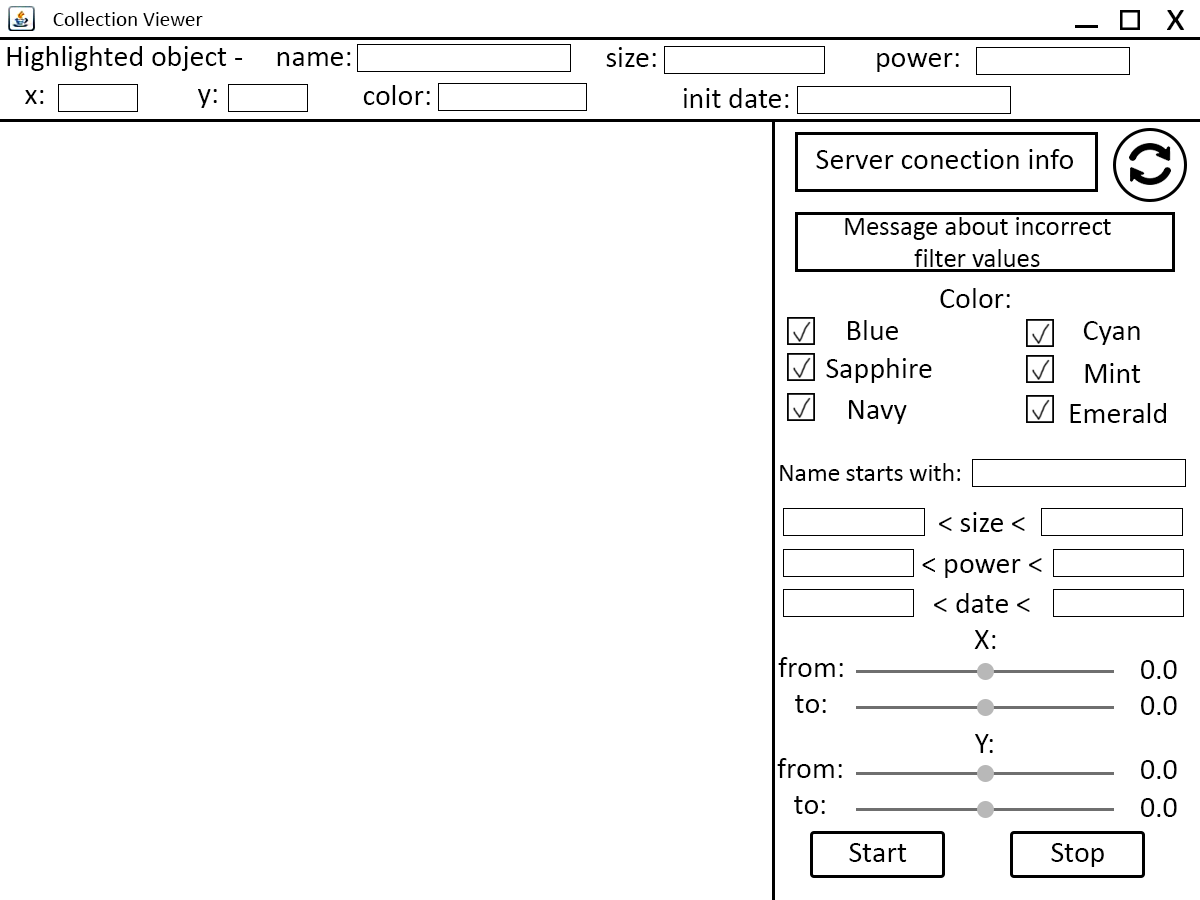
<style>
.page{position:relative;width:1200px;height:900px;background:#ffffff}
.page>*{position:absolute;margin:0}
.t1{font:21.1px "Calibri";color:#000000}
.t2{font:44.2px "Calibri";color:#000000}
.t3{font:30px "Calibri";color:#000000}
.t4{font:26.7px "Calibri";color:#000000}
.t5{font:25.5px "Calibri";color:#000000}
</style>
<div class="page">
<p class="t1" style="left:53px;top:12px;width:150px;height:14px">Collection Viewer</p>
<p class="t2" style="left:1167px;top:10px;width:18px;height:20px">x</p>
<p class="t3" style="left:7px;top:46px;width:236px;height:25px">Highlighted object -</p>
<p class="t3" style="left:277px;top:52px;width:74px;height:14px">name:</p>
<p class="t3" style="left:606px;top:47px;width:50px;height:20px">size:</p>
<p class="t3" style="left:877px;top:53px;width:82px;height:19px">power:</p>
<p class="t3" style="left:198px;top:89px;width:19px;height:19px">y:</p>
<p class="t3" style="left:363px;top:85px;width:67px;height:20px">color:</p>
<p class="t3" style="left:683px;top:88px;width:106px;height:20px">init date:</p>
<p class="t3" style="left:25px;top:90px;width:19px;height:14px">x:</p>
<p class="t3" style="left:816px;top:149px;width:257px;height:20px">Server conection info</p>
<p class="t4" style="left:845px;top:217px;width:266px;height:50px;text-align:center">Message about incorrect<br>filter values</p>
<p class="t3" style="left:940px;top:288px;width:70px;height:20px">Color:</p>
<p class="t3" style="left:848px;top:320px;width:50px;height:20px">Blue</p>
<p class="t3" style="left:1083px;top:321px;width:57px;height:24px">Cyan</p>
<p class="t3" style="left:826px;top:358px;width:106px;height:25px">Sapphire</p>
<p class="t3" style="left:1085px;top:363px;width:56px;height:20px">Mint</p>
<p class="t3" style="left:849px;top:400px;width:58px;height:24px">Navy</p>
<p class="t3" style="left:1070px;top:403px;width:96px;height:20px">Emerald</p>
<p class="t5" style="left:780px;top:463px;width:181px;height:18px">Name starts with:</p>
<p class="t3" style="left:939px;top:512px;width:86px;height:20px">&lt; size &lt;</p>
<p class="t3" style="left:922px;top:558px;width:120px;height:20px">&lt; power &lt;</p>
<p class="t3" style="left:934px;top:593px;width:96px;height:20px">&lt; date &lt;</p>
<p class="t3" style="left:974px;top:630px;width:22px;height:19px">X:</p>
<p class="t3" style="left:778px;top:657px;width:65px;height:56px;text-align:center">from:<br>to:</p>
<p class="t3" style="left:1141px;top:660px;width:36px;height:19px">0.0</p>
<p class="t3" style="left:1141px;top:696px;width:36px;height:19px">0.0</p>
<p class="t3" style="left:975px;top:734px;width:18px;height:19px">Y:</p>
<p class="t3" style="left:777px;top:758px;width:65px;height:56px;text-align:center">from:<br>to:</p>
<p class="t3" style="left:1141px;top:760px;width:36px;height:19px">0.0</p>
<p class="t3" style="left:1141px;top:798px;width:36px;height:19px">0.0</p>
<p class="t3" style="left:849px;top:843px;width:58px;height:19px">Start</p>
<p class="t3" style="left:1051px;top:843px;width:53px;height:24px">Stop</p>
</div>
